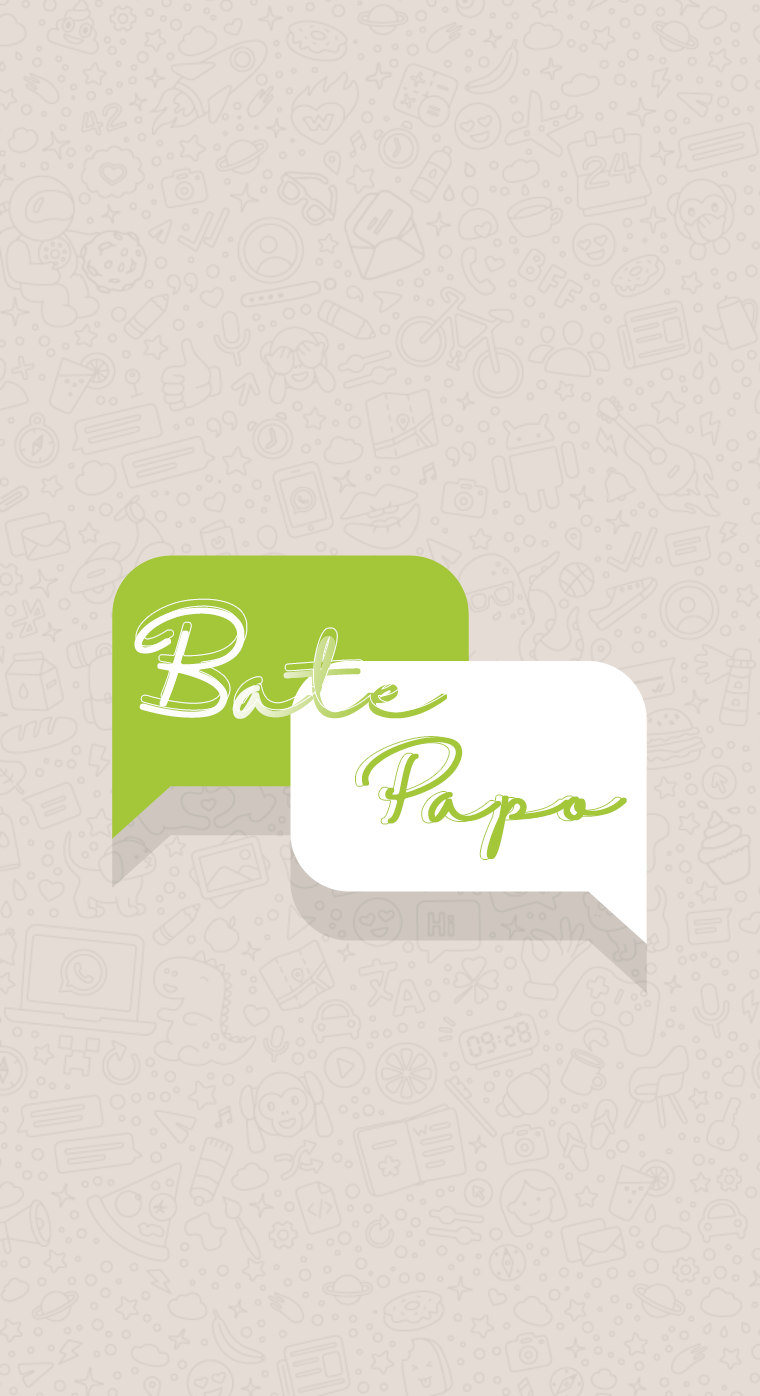
<style>
.page{position:relative;width:760px;height:1396px;background:#e5ddd5}
.page>*{position:absolute;margin:0}
.t1{font:87.1px "HalimunRegular";font-weight:bold}
.t2{font:79.2px "HalimunRegular";font-weight:bold}
.t3{font:79.2px "HalimunRegular";color:#a4c639;font-weight:bold}
</style>
<div class="page">
<p class="t1" style="left:134px;top:607px;width:313px;height:112px">Bate</p>
<p class="t2" style="left:356px;top:737px;width:265px;height:122px">Papo</p>
<p class="t3" style="left:362px;top:737px;width:265px;height:122px">Papo</p>
</div>
